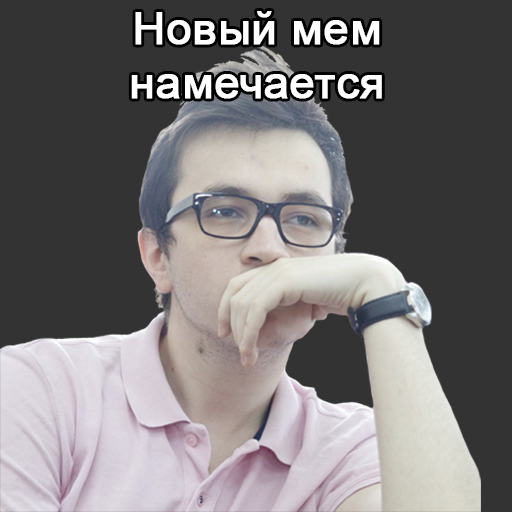
<style>
.page{position:relative;width:512px;height:512px;background:#333333}
.page>*{position:absolute;margin:0}
.t1{font:45px "ArialMT";color:#ffffff;font-weight:bold}
</style>
<div class="page">
<p class="t1" style="left:131px;top:11px;width:251px;height:88px;text-align:center">Новый мем<br>намечается</p>
</div>
